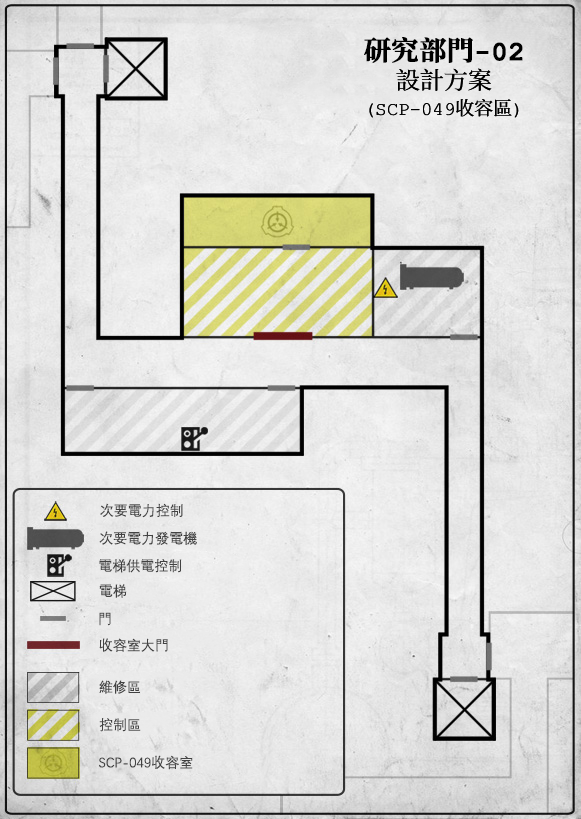
<style>
.page{position:relative;width:581px;height:819px}
.page>*{position:absolute;margin:0}
.t1{font:27px "ContainmentBreach-Bold";color:#000000;font-weight:bold}
.t2{font:24px "ContainmentBreach-Regular";color:#000000}
.t3{font:19px "ContainmentBreach-Regular";color:#000000}
.t4{font:14px "DengXian";color:#424242}
</style>
<div class="page">
<p class="t1" style="left:364px;top:37px;width:159px;height:26px">研究部門-02</p>
<p class="t2" style="left:396px;top:68px;width:96px;height:23px">設計方案</p>
<p class="t3" style="left:369px;top:99px;width:150px;height:19px">（SCP-049收容區）</p>
<p class="t4" style="left:100px;top:503px;width:83px;height:15px">次要電力控制</p>
<p class="t4" style="left:99px;top:531px;width:98px;height:14px">次要電力發電機</p>
<p class="t4" style="left:99px;top:559px;width:83px;height:14px">電梯供電控制</p>
<p class="t4" style="left:99px;top:584px;width:28px;height:14px">電梯</p>
<p class="t4" style="left:99px;top:612px;width:12px;height:14px">門</p>
<p class="t4" style="left:99px;top:638px;width:69px;height:14px">收容室大門</p>
<p class="t4" style="left:99px;top:680px;width:41px;height:14px">維修區</p>
<p class="t4" style="left:99px;top:718px;width:42px;height:14px">控制區</p>
<p class="t4" style="left:99px;top:755px;width:94px;height:15px">SCP-049收容室</p>
</div>
